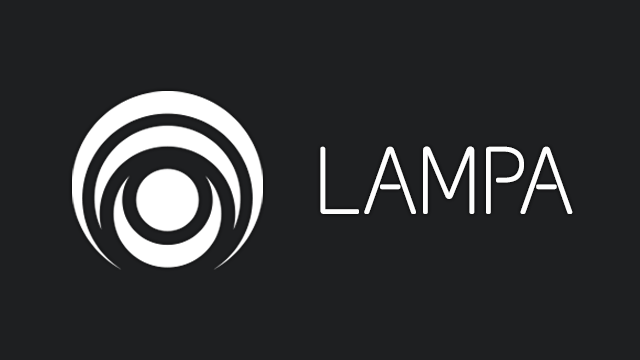
<style>
.page{position:relative;width:640px;height:360px;background:#1e1f21}
.page>*{position:absolute;margin:0}
.t1{font:96px "TextMeOne-Regular";letter-spacing:-0.005em;color:#fefefe}
.t2{font:96px "TextMeOne-Regular";letter-spacing:-0.1em;color:#fefefe}
</style>
<div class="page">
<p class="t1" style="left:320px;top:146px;width:253px;height:68px">LAM<span class="t2">P</span>A</p>
</div>
